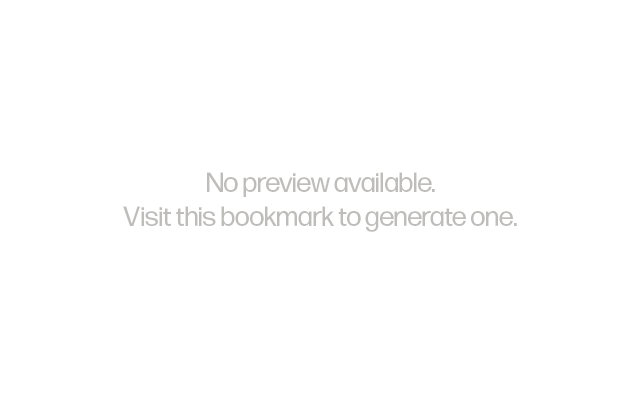
<style>
.page{position:relative;width:640px;height:400px;background:#ffffff}
.page>*{position:absolute;margin:0}
.t1{font:28px "FormaDJRDisplay-Regular";color:#bebdbb}
</style>
<div class="page">
<p class="t1" style="left:123px;top:172px;width:394px;height:60px;text-align:center">No preview available.<br>Visit this bookmark to generate one .</p>
</div>
